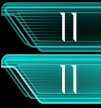
<style>
.page{position:relative;width:101px;height:108px}
.page>*{position:absolute;margin:0}
.t1{font:41.7px "Spectre007";letter-spacing:-0.05em;color:#fefefe}
</style>
<div class="page">
<p class="t1" style="left:60px;top:12px;width:17px;height:30px">I I</p>
<p class="t1" style="left:60px;top:65px;width:17px;height:29px">I I</p>
</div>
